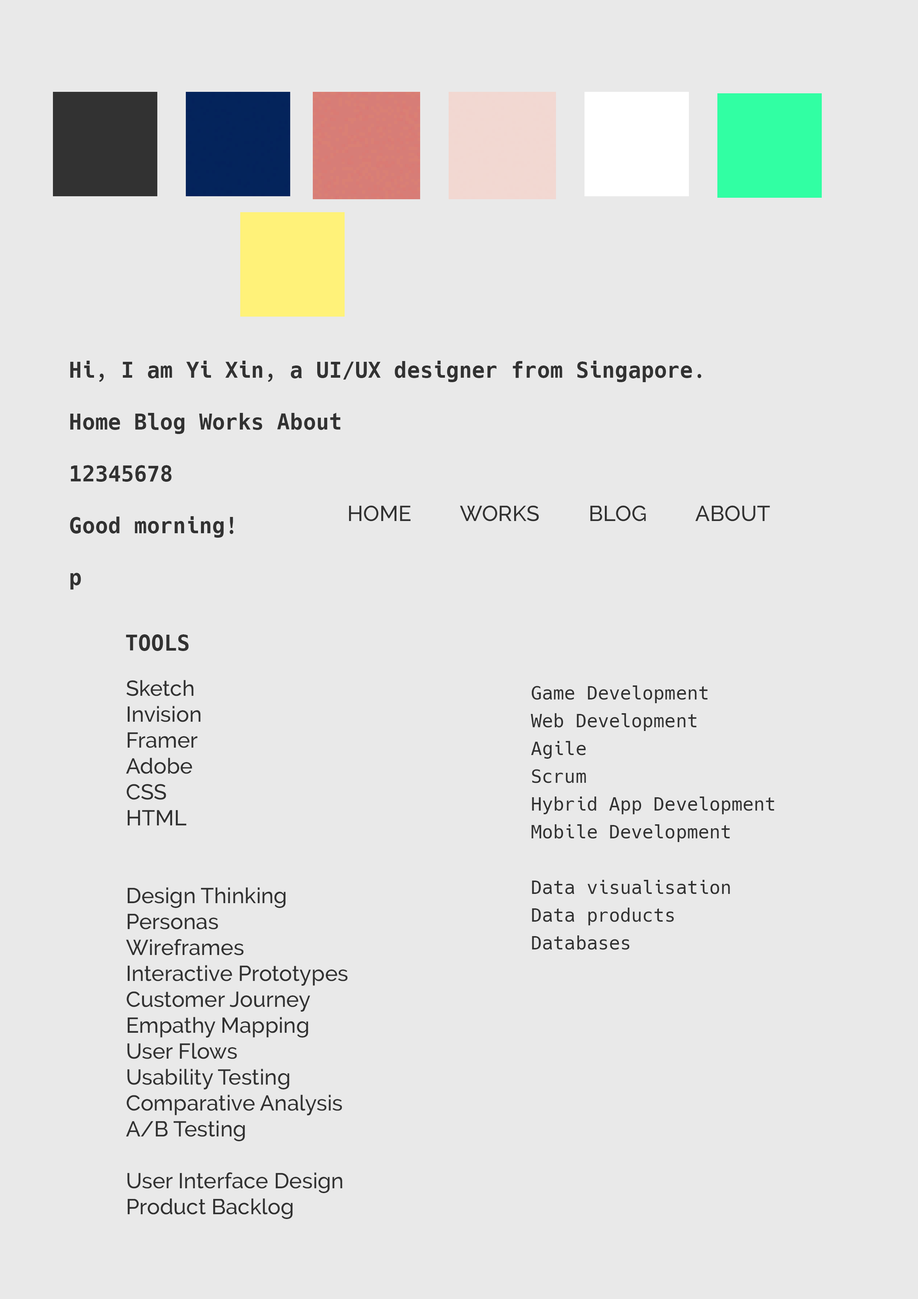
<style>
.page{position:relative;width:918px;height:1299px;background:#e9e9e9}
.page>*{position:absolute;margin:0}
.t1{font:21.6px "Hack-Bold";color:#323232}
.t2{font:21.6px "Raleway-Medium";color:#323232}
.t3{font:18.5px/27.8px "Hack-Regular";color:#323232}
</style>
<div class="page">
<p class="t1" style="left:70px;top:361px;width:632px;height:228px">Hi, I am Yi Xin, a UI/UX designer from Singapore. <br><br>Home Blog Works About<br><br>12345678<br><br>Good morning!<br><br>p</p>
<p class="t2" style="left:349px;top:505px;width:421px;height:16px">HOME         WORKS         BLOG         ABOUT</p>
<p class="t1" style="left:126px;top:634px;width:63px;height:17px">TOOLS</p>
<p class="t2" style="left:126px;top:680px;width:222px;height:539px">Sketch<br>Invision<br>Framer<br>Adobe <br>CSS<br>HTML<br><br><br>Design Thinking<br>Personas<br>Wireframes<br>Interactive Prototypes<br>Customer Journey<br>Empathy Mapping<br>User Flows<br>Usability Testing<br>Comparative Analysis<br>A/B Testing<br><br>User Interface Design<br>Product Backlog</p>
<p class="t3" style="left:531px;top:685px;width:244px;height:265px">Game Development<br>Web Development<br>Agile<br>Scrum<br>Hybrid App Development<br>Mobile Development<br><br>Data visualisation<br>Data products<br>Databases</p>
</div>
